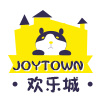
<style>
.page{position:relative;width:100px;height:100px;background:#ffffff}
.page>*{position:absolute;margin:0}
.t1{font:14.5px "FZSEJW--GB1-0";color:#352d51}
.t2{font:18px "FZSEJW--GB1-0";color:#352d51}
</style>
<div class="page">
<p class="t1" style="left:12px;top:60px;width:71px;height:11px">JOYTOWN</p>
<p class="t2" style="left:27px;top:76px;width:53px;height:17px">欢乐城</p>
</div>
